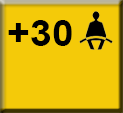
<style>
.page{position:relative;width:123px;height:113px;background:#f4ca09}
.page>*{position:absolute;margin:0}
.t1{font:36.3px "Arial-BoldMT";color:#000000;scale:1.07 1}
</style>
<div class="page">
<p class="t1" style="left:8px;top:20px;width:64px;height:26px">+30</p>
</div>
